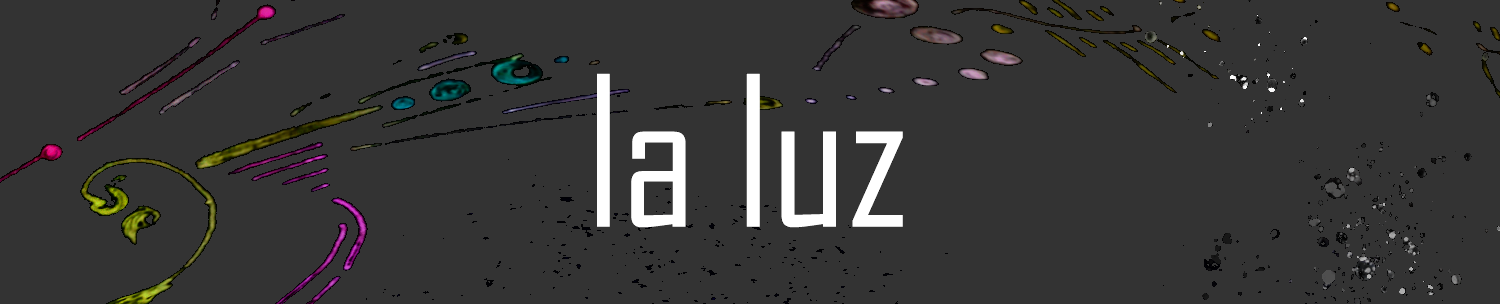
<style>
.page{position:relative;width:1500px;height:304px;background:#333333}
.page>*{position:absolute;margin:0}
.t1{font:200px "AgencyFB-Reg";color:#ffffff}
</style>
<div class="page">
<p class="t1" style="left:597px;top:73px;width:306px;height:155px">la luz</p>
</div>
